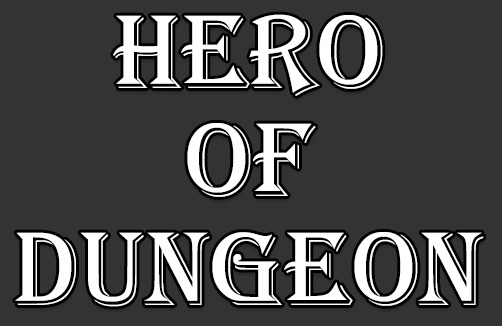
<style>
.page{position:relative;width:502px;height:326px;background:#333333}
.page>*{position:absolute;margin:0}
.t1{font:108.5px/108.5px "Algerian";color:#ffffff}
</style>
<div class="page">
<p class="t1" style="left:15px;top:14px;width:469px;height:293px;text-align:center">Hero<br>of<br>Dungeon</p>
</div>
